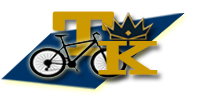
<style>
.page{position:relative;width:200px;height:100px;background:#ffffff}
.page>*{position:absolute;margin:0}
.t1{font:60.4px "Rockwell";letter-spacing:0.01em;font-weight:bold;scale:1.76 1}
.t2{font:48px "Rockwell";letter-spacing:0.01em;color:#cc9900;font-weight:bold;scale:1.94 1}
</style>
<div class="page">
<p class="t1" style="left:52px;top:11px;width:63px;height:45px">T</p>
<p class="t2" style="left:98px;top:41px;width:60px;height:34px">K</p>
</div>
